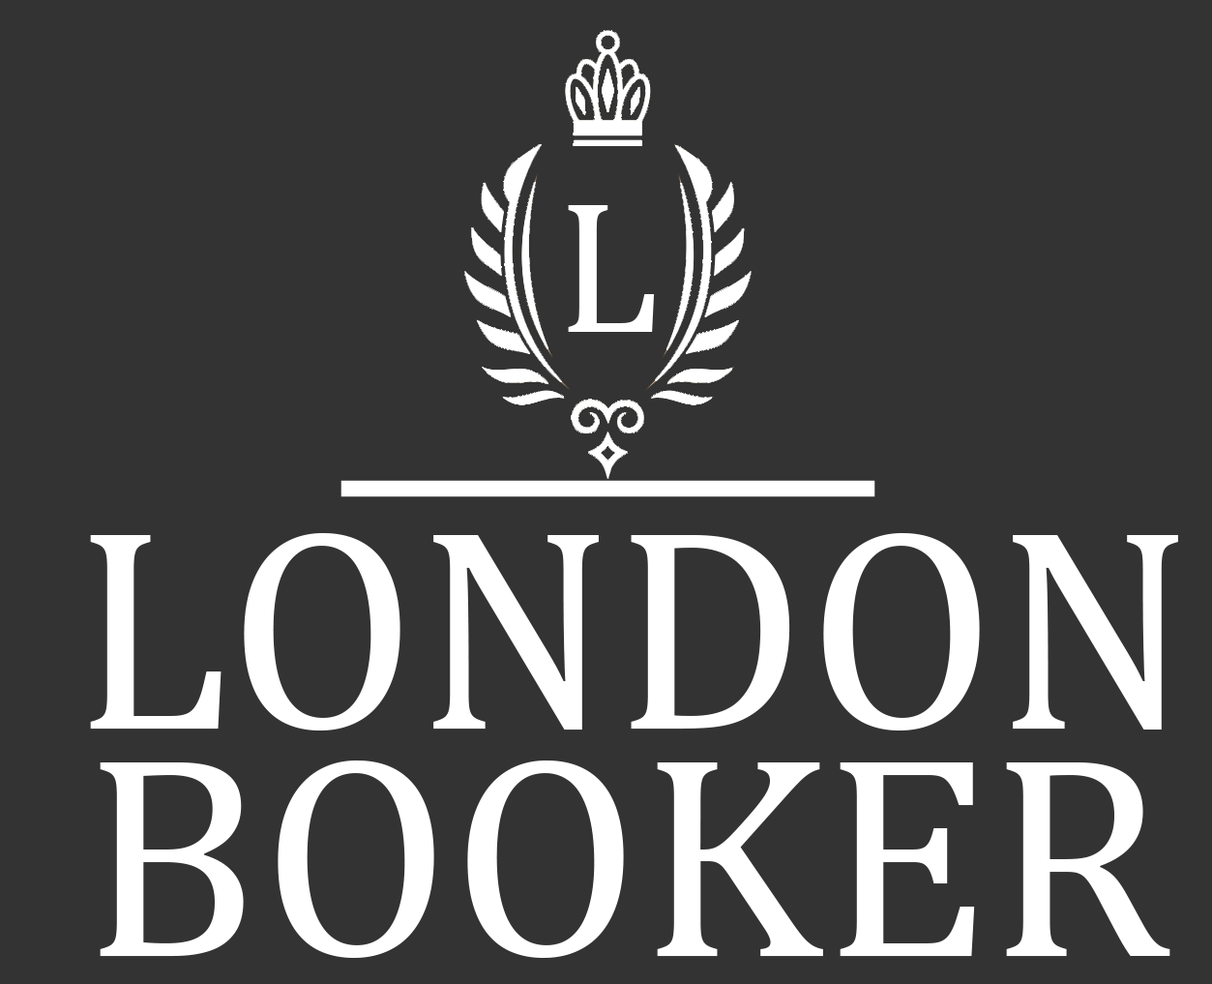
<style>
.page{position:relative;width:1212px;height:984px;background:#333333}
.page>*{position:absolute;margin:0}
.t1{font:290.4px "Cambria";color:#ffffff}
</style>
<div class="page">
<p class="t1" style="left:90px;top:533px;width:1088px;height:197px">LONDON</p>
<p class="t1" style="left:100px;top:760px;width:1070px;height:198px">BOOKER</p>
</div>
